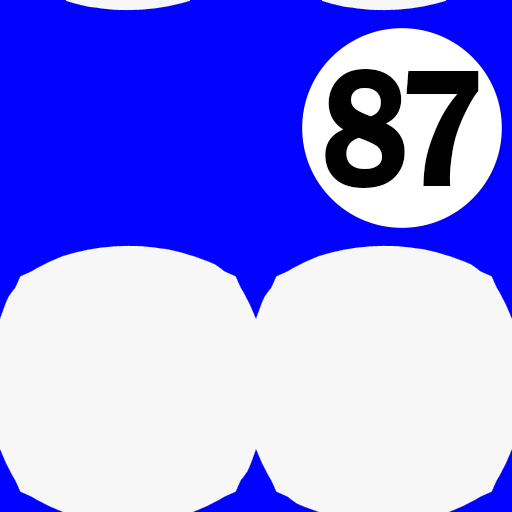
<style>
.page{position:relative;width:512px;height:512px;background:#f7f7f7}
.page>*{position:absolute;margin:0}
.t1{font:172.5px "FranklinGothic-Demi";letter-spacing:-0.05em;color:#010101;scale:0.87 1}
</style>
<div class="page">
<p class="t1" style="left:325px;top:69px;width:154px;height:119px">87</p>
</div>
